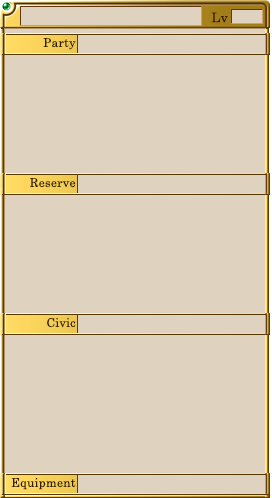
<style>
.page{position:relative;width:272px;height:498px;background:#dfd3c0}
.page>*{position:absolute;margin:0}
.t1{font:13.3px "CenturySchoolbook";letter-spacing:0.025em;color:#321a02}
.t2{font:12px "CenturySchoolbook";letter-spacing:0.025em;color:#321a02}
</style>
<div class="page">
<p class="t1" style="left:211px;top:12px;width:17px;height:11px">Lv</p>
<p class="t2" style="left:43px;top:38px;width:33px;height:12px">Party</p>
<p class="t2" style="left:30px;top:178px;width:46px;height:10px">Reserve</p>
<p class="t2" style="left:47px;top:318px;width:29px;height:10px">Civic</p>
<p class="t2" style="left:11px;top:478px;width:65px;height:12px">Equipment</p>
</div>
